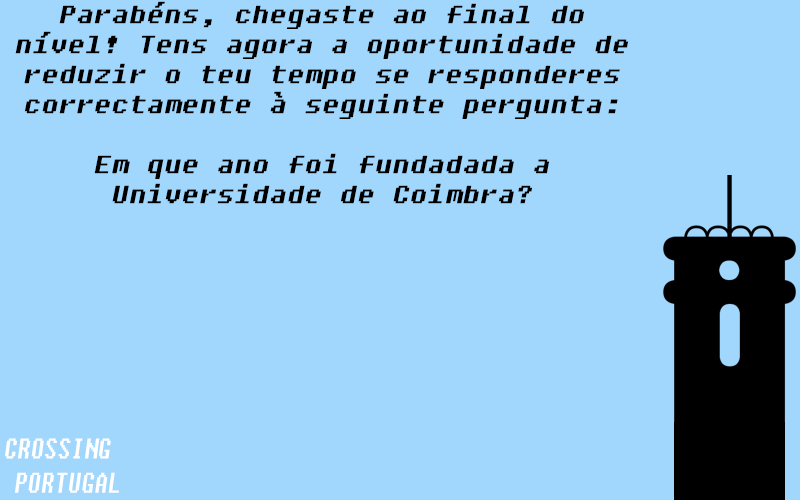
<style>
.page{position:relative;width:800px;height:500px;background:#a1d7fd}
.page>*{position:absolute;margin:0}
.t1{font:25px "Fixedsys";color:#000000;font-style:italic;scale:1.12 1}
.t2{font:28.4px "Fixedsys";color:#ffffff;font-style:italic;scale:0.76 1}
</style>
<div class="page">
<p class="t1" style="left:15px;top:1px;width:614px;height:203px;text-align:center">Parabéns, chegaste ao final do nível! Tens agora a oportunidade de reduzir o teu tempo se responderes correctamente à seguinte pergunta: <br><br>Em que ano foi fundadada a Universidade de Coimbra?</p>
<p class="t2" style="left:5px;top:438px;width:114px;height:55px">CROSSING <br> PORTUGAL</p>
</div>
